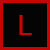
<style>
.page{position:relative;width:50px;height:50px;background:#040404}
.page>*{position:absolute;margin:0}
.t1{font:27.6px "LucidaGrande";color:#c70505}
</style>
<div class="page">
<p class="t1" style="left:19px;top:15px;width:13px;height:20px">L</p>
</div>
